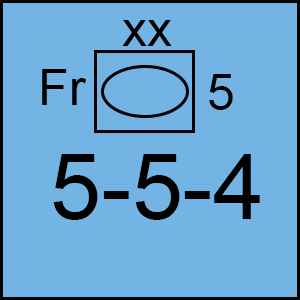
<style>
.page{position:relative;width:300px;height:300px;background:#74b4e4}
.page>*{position:absolute;margin:0}
.t1{font:50px "ArialMT";color:#000000}
.t2{font:91.7px "ArialMT";color:#000000}
</style>
<div class="page">
<p class="t1" style="left:122px;top:20px;width:50px;height:26px">xx</p>
<p class="t1" style="left:42px;top:69px;width:44px;height:36px">Fr</p>
<p class="t1" style="left:209px;top:74px;width:24px;height:36px">5</p>
<p class="t2" style="left:53px;top:154px;width:207px;height:66px">5-5-4</p>
</div>
